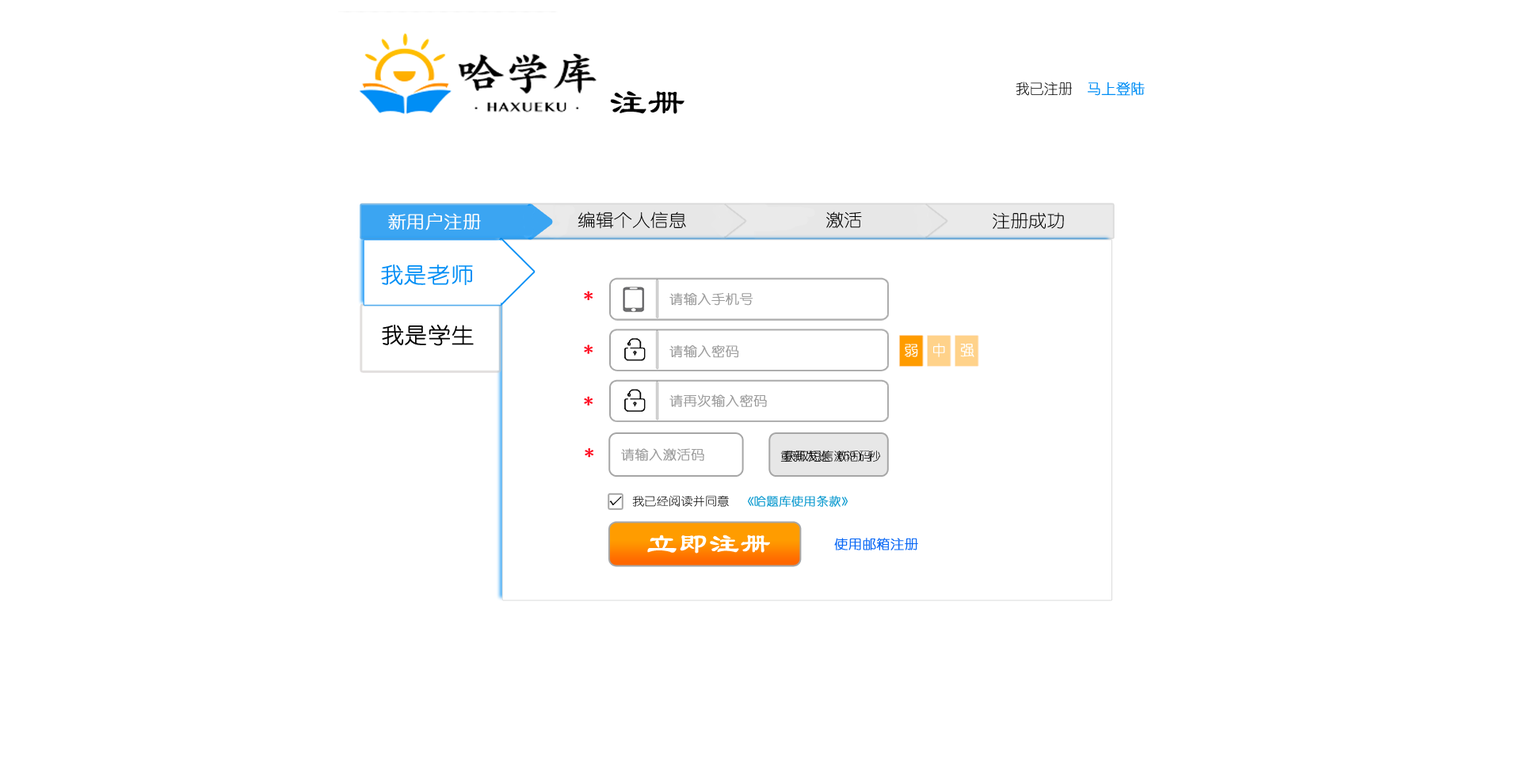
<style>
.page{position:relative;width:1521px;height:784px;background:#ffffff}
.page>*{position:absolute;margin:0}
.t1{font:14.3px "YouYuan";color:#000000}
.t2{font:14.3px "YouYuan";color:#008ef5;font-weight:bold}
.t3{font:38px "LiSu";color:#000000}
.t4{font:17.2px "YouYuan";color:#fffdfd;font-weight:bold;scale:1.06 1}
.t5{font:17.2px "YouYuan";color:#000000;scale:1.06 1}
.t6{font:21.5px "YouYuan";color:#008ef5;font-weight:bold;scale:1.06 1}
.t7{font:17.2px "YouYuan";color:#ff051d;font-weight:bold;scale:1.06 1}
.t8{font:12.9px "YouYuan";color:#9b9b9b;font-weight:bold;scale:1.06 1}
.t9{font:21.5px "YouYuan";color:#000000;font-weight:bold;scale:1.06 1}
.t10{font:14.3px "YouYuan";color:#ffffff;font-weight:bold}
.t11{font:11.9px "YouYuan";color:#010101;scale:1.06 1}
.t12{font:11.5px "YouYuan";color:#000000;font-weight:bold;scale:1.06 1}
.t13{font:11.5px "YouYuan";color:#119cd0;font-weight:bold;scale:1.06 1}
.t14{font:11.5px "YouYuan";color:#000000;scale:1.06 1}
.t15{font:28.7px "LiSu";color:#ffffff;font-weight:bold;scale:1.06 1}
.t16{font:12.9px "YouYuan";color:#0a68f5;font-weight:bold;scale:1.06 1}
</style>
<div class="page">
<p class="t1" style="left:1015px;top:82px;width:130px;height:14px">我已注册  <span class="t2">马上登陆</span></p>
<p class="t3" style="left:610px;top:91px;width:74px;height:23px">注册</p>
<p class="t4" style="left:388px;top:213px;width:93px;height:17px">新用户注册</p>
<p class="t5" style="left:577px;top:211px;width:109px;height:18px">编辑个人信息</p>
<p class="t5" style="left:826px;top:211px;width:36px;height:17px">激活</p>
<p class="t5" style="left:992px;top:212px;width:72px;height:17px">注册成功</p>
<p class="t6" style="left:381px;top:264px;width:92px;height:21px">我是老师</p>
<p class="t7" style="left:584px;top:291px;width:8px;height:9px">*</p>
<p class="t8" style="left:669px;top:292px;width:84px;height:14px">请输入手机号</p>
<p class="t9" style="left:382px;top:325px;width:92px;height:21px">我是学生</p>
<p class="t7" style="left:584px;top:345px;width:8px;height:9px">*</p>
<p class="t8" style="left:669px;top:345px;width:70px;height:13px">请输入密码</p>
<p class="t10" style="left:905px;top:344px;width:13px;height:13px">弱</p>
<p class="t10" style="left:933px;top:343px;width:12px;height:14px">中</p>
<p class="t10" style="left:960px;top:344px;width:14px;height:13px">强</p>
<p class="t7" style="left:584px;top:396px;width:8px;height:10px">*</p>
<p class="t8" style="left:669px;top:394px;width:98px;height:13px">请再次输入密码</p>
<p class="t7" style="left:585px;top:448px;width:8px;height:10px">*</p>
<p class="t8" style="left:621px;top:448px;width:83px;height:13px">请输入激活码</p>
<p class="t11" style="left:780px;top:450px;width:101px;height:12px">重新发送（59）秒</p>
<p class="t11" style="left:783px;top:450px;width:87px;height:12px">获取短信激活码</p>
<p class="t12" style="left:609px;top:497px;width:13px;height:8px">√</p>
<p class="t13" style="left:632px;top:495px;width:216px;height:12px"><span class="t14">我已经阅读并同意  </span>《哈题库使用条款》</p>
<p class="t15" style="left:647px;top:535px;width:123px;height:19px">立即注册</p>
<p class="t16" style="left:834px;top:538px;width:84px;height:12px">使用邮箱注册</p>
</div>
